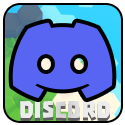
<style>
.page{position:relative;width:125px;height:125px;background:#5865f2}
.page>*{position:absolute;margin:0}
.t1{font:25.9px "Troika";color:#ffffff}
</style>
<div class="page">
<p class="t1" style="left:20px;top:101px;width:91px;height:17px">DISCORD</p>
</div>
